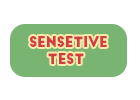
<style>
.page{position:relative;width:140px;height:100px;background:#ffffff}
.page>*{position:absolute;margin:0}
.t1{font:14px "BigJohn";color:#d33e43}
</style>
<div class="page">
<p class="t1" style="left:30px;top:36px;width:77px;height:28px">Sensetive<br>   Test</p>
</div>
